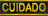
<style>
.page{position:relative;width:48px;height:16px}
.page>*{position:absolute;margin:0}
.t1{font:11px "ArialMT";font-weight:bold;scale:0.83 1}
</style>
<div class="page">
<p class="t1" style="left:2px;top:3px;width:44px;height:9px">CUIDADO</p>
</div>
